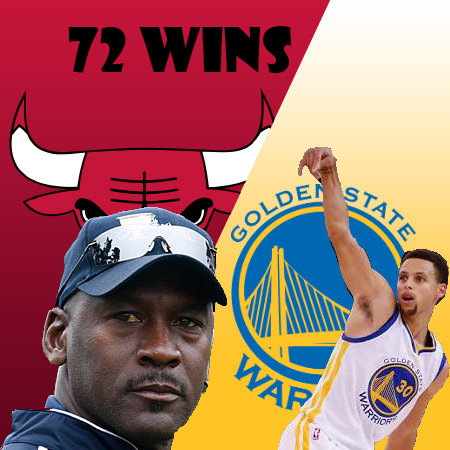
<style>
.page{position:relative;width:450px;height:450px}
.page>*{position:absolute;margin:0}
.t1{font:60px "ShowcardGothic-Reg";color:#000000}
</style>
<div class="page">
<p class="t1" style="left:68px;top:26px;width:224px;height:47px">72 wins</p>
</div>
